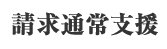
<style>
.page{position:relative;width:167px;height:49px;background:#ffffff}
.page>*{position:absolute;margin:0}
.t1{font:24px "RyuminPr6N-ExBold";color:#343434;font-weight:bold}
</style>
<div class="page">
<p class="t1" style="left:11px;top:12px;width:147px;height:24px">請求通常支援</p>
</div>
